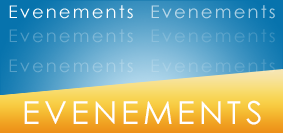
<style>
.page{position:relative;width:283px;height:133px}
.page>*{position:absolute;margin:0}
.t1{font:31.7px "CenturyGothic";letter-spacing:0.12em;color:#ffffff;scale:1.04 1}
</style>
<div class="page">
<p class="t1" style="left:24px;top:100px;width:237px;height:25px">EVENEMENTS</p>
</div>
